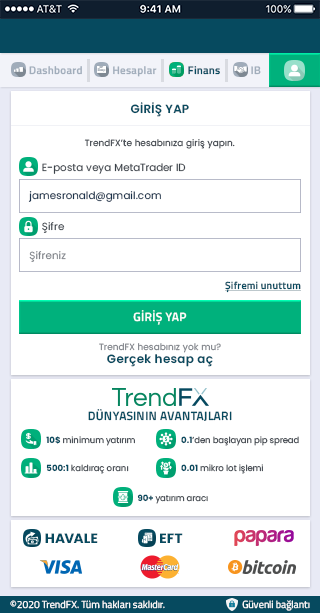
<style>
.page{position:relative;width:320px;height:613px;background:#ffffff}
.page>*{position:absolute;margin:0}
.t1{font:11.1px "TitilliumWeb-SemiBold";letter-spacing:0.025em;color:#a1adbb}
.t2{font:11.1px "TitilliumWeb-SemiBold";letter-spacing:0.025em;color:#064a5f}
.t3{font:11.9px "Poppins-SemiBold";letter-spacing:0.01em;color:#064a5f}
.t4{font:9px "Poppins-Regular";letter-spacing:0.01em;color:#3a4149}
.t5{font:10.2px "Poppins-Regular";letter-spacing:0.01em;color:#3a4149}
.t6{font:10.2px "Poppins-Regular";letter-spacing:0.01em;color:#1a324c}
.t7{font:10.2px "Poppins-Regular";letter-spacing:0.01em;color:#7f8389}
.t8{font:10.2px "TitilliumWeb-SemiBold";letter-spacing:0.025em;color:#064a5f;text-decoration:underline}
.t9{font:11.9px "TitilliumWeb-SemiBold";letter-spacing:0.025em;color:#ffffff}
.t10{font:9px "Poppins-Regular";letter-spacing:0.01em;color:#7f8389}
.t11{font:11.9px "Poppins-SemiBold";letter-spacing:0.025em;color:#064a5f}
.t12{font:11.9px "TitilliumWeb-SemiBold";letter-spacing:0.025em;color:#064a5f}
.t13{font:8.5px "Poppins-Regular";color:#3a4149}
.t14{font:8.5px "Poppins-Bold";color:#064a5f}
.t15{font:13.7px "Poppins-Bold";color:#064a5f}
.t16{font:13.7px "Poppins-Bold";letter-spacing:0.025em;color:#064a5f}
.t17{font:10.2px "TitilliumWeb-Regular";color:#ffffff}
</style>
<div class="page">
<p class="t1" style="left:29px;top:66px;width:53px;height:9px">Dashboard</p>
<p class="t1" style="left:113px;top:66px;width:44px;height:11px">Hesaplar</p>
<p class="t2" style="left:188px;top:66px;width:32px;height:9px">Finans</p>
<p class="t1" style="left:251px;top:66px;width:10px;height:9px">IB</p>
<p class="t3" style="left:130px;top:102px;width:59px;height:15px">GİRİŞ YAP</p>
<p class="t4" style="left:84px;top:139px;width:151px;height:10px">TrendFX’te hesabınıza giriş yapın.</p>
<p class="t5" style="left:42px;top:163px;width:144px;height:11px">E-posta veya MetaTrader ID</p>
<p class="t6" style="left:28px;top:191px;width:133px;height:11px">jamesronald@gmail.com</p>
<p class="t5" style="left:42px;top:222px;width:23px;height:11px">Şifre</p>
<p class="t7" style="left:29px;top:251px;width:37px;height:11px">Şifreniz</p>
<p class="t8" style="left:225px;top:281px;width:76px;height:12px">Şifremi unuttum</p>
<p class="t9" style="left:133px;top:310px;width:54px;height:15px">GİRİŞ YAP</p>
<p class="t10" style="left:99px;top:343px;width:122px;height:10px">TrendFX hesabınız yok mu?</p>
<p class="t11" style="left:107px;top:354px;width:106px;height:13px">Gerçek hesap aç</p>
<p class="t12" style="left:88px;top:409px;width:144px;height:12px">DÜNYASININ AVANTAJLARI</p>
<p class="t13" style="left:46px;top:436px;width:89px;height:10px"><span class="t14">10$ </span>minimum yatırım</p>
<p class="t13" style="left:181px;top:436px;width:118px;height:10px"><span class="t14">0.1</span>’den başlayan pip spread</p>
<p class="t13" style="left:46px;top:464px;width:83px;height:10px"><span class="t14">500:1 </span>kaldıraç oranı</p>
<p class="t13" style="left:181px;top:464px;width:82px;height:10px"><span class="t14">0.01 </span>mikro lot işlemi</p>
<p class="t13" style="left:137px;top:494px;width:71px;height:10px"><span class="t14">90+ </span>yatırım aracı</p>
<p class="t15" style="left:45px;top:533px;width:53px;height:10px">HAVALE</p>
<p class="t16" style="left:160px;top:533px;width:23px;height:10px">EFT</p>
<p class="t17" style="left:10px;top:600px;width:155px;height:9px">©2020 TrendFX. Tüm hakları saklıdır.</p>
<p class="t17" style="left:242px;top:600px;width:68px;height:11px">Güvenli bağlantı</p>
</div>
